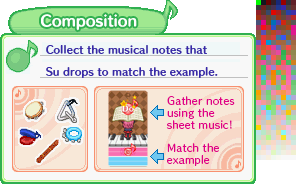
<style>
.page{position:relative;width:296px;height:192px;background:#f8f8f8}
.page>*{position:absolute;margin:0}
.t1{font:14px "HummingStd-B";letter-spacing:0.02em;color:#ffffff}
.t2{font:9.5px/22px "HummingStd-B";letter-spacing:0.025em;color:#3828a8}
.t3{font:9.5px/12px "HummingStd-D";letter-spacing:0.025em;color:#e00088}
.t4{font:9.5px/12px "HummingStd-D";letter-spacing:0.025em;color:#e00088;scale:0.96 1}
</style>
<div class="page">
<p class="t1" style="left:41px;top:14px;width:96px;height:17px">Composition</p>
<p class="t2" style="left:46px;top:45px;width:172px;height:33px">Collect the musical notes that<br>Su drops to match the example.</p>
<p class="t3" style="left:166px;top:96px;width:69px;height:33px">Gather notes<br>using the<br>sheet music!</p>
<p class="t3" style="left:167px;top:143px;width:52px;height:23px">Match the<br>ex<span class="t4">a</span>mple</p>
</div>
